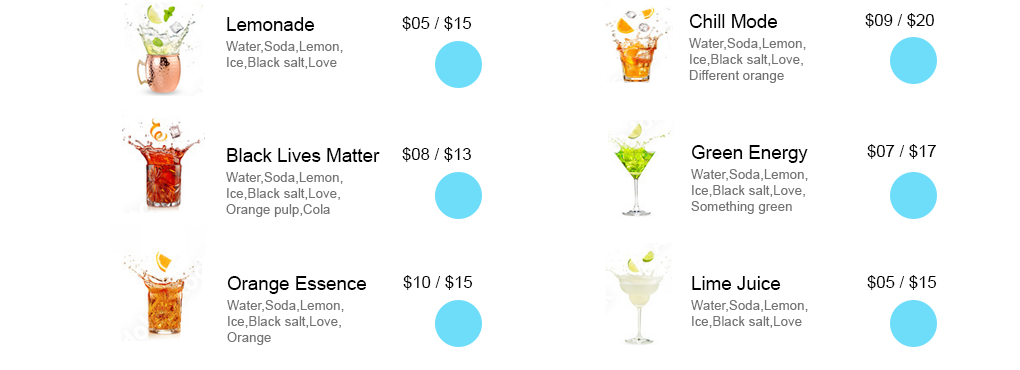
<style>
.page{position:relative;width:1020px;height:370px;background:#ffffff}
.page>*{position:absolute;margin:0}
.t1{font:18.8px "ArialMT";color:#010101}
.t2{font:16.7px "ArialMT";color:#010101}
.t3{font:13.3px "ArialMT";color:#747474}
</style>
<div class="page">
<p class="t1" style="left:227px;top:17px;width:88px;height:14px">Lemonade</p>
<p class="t2" style="left:402px;top:16px;width:70px;height:15px">$05 / $15</p>
<p class="t1" style="left:689px;top:14px;width:89px;height:14px">Chill Mode</p>
<p class="t2" style="left:865px;top:13px;width:69px;height:15px">$09 / $20</p>
<p class="t3" style="left:226px;top:41px;width:117px;height:28px">Water,Soda,Lemon,<br>Ice,Black salt,Love</p>
<p class="t3" style="left:689px;top:38px;width:117px;height:45px">Water,Soda,Lemon,<br>Ice,Black salt,Love,<br>Different orange</p>
<p class="t1" style="left:227px;top:148px;width:153px;height:14px">Black Lives Matter</p>
<p class="t2" style="left:402px;top:147px;width:69px;height:15px">$08 / $13</p>
<p class="t1" style="left:692px;top:145px;width:116px;height:18px">Green Energy</p>
<p class="t2" style="left:867px;top:144px;width:69px;height:15px">$07 / $17</p>
<p class="t3" style="left:226px;top:172px;width:117px;height:45px">Water,Soda,Lemon,<br>Ice,Black salt,Love,<br>Orange pulp,Cola</p>
<p class="t3" style="left:691px;top:169px;width:117px;height:45px">Water,Soda,Lemon,<br>Ice,Black salt,Love,<br>Something green</p>
<p class="t1" style="left:227px;top:276px;width:140px;height:18px">Orange Essence</p>
<p class="t2" style="left:403px;top:275px;width:70px;height:15px">$10 / $15</p>
<p class="t1" style="left:692px;top:276px;width:89px;height:14px">Lime Juice</p>
<p class="t2" style="left:867px;top:275px;width:70px;height:15px">$05 / $15</p>
<p class="t3" style="left:227px;top:300px;width:117px;height:45px">Water,Soda,Lemon,<br>Ice,Black salt,Love,<br>Orange</p>
<p class="t3" style="left:691px;top:300px;width:117px;height:28px">Water,Soda,Lemon,<br>Ice,Black salt,Love</p>
</div>
